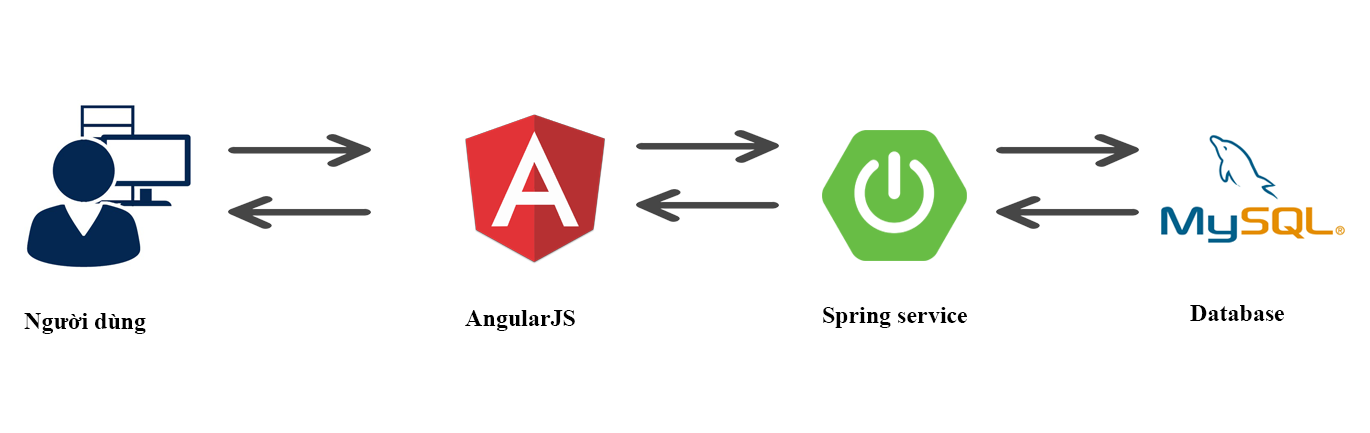
<style>
.page{position:relative;width:1370px;height:433px;background:#ffffff}
.page>*{position:absolute;margin:0}
.t1{font:24px "TimesNewRomanPS-BoldMT";color:#000000}
</style>
<div class="page">
<p class="t1" style="left:1190px;top:305px;width:94px;height:16px">Database</p>
<p class="t1" style="left:24px;top:313px;width:122px;height:21px">Người dùng</p>
<p class="t1" style="left:465px;top:310px;width:110px;height:21px">AngularJS</p>
<p class="t1" style="left:823px;top:307px;width:144px;height:21px">Spring service</p>
</div>
